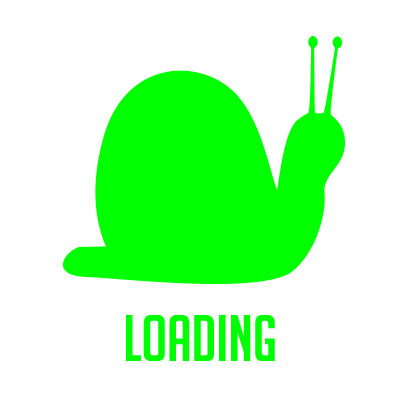
<style>
.page{position:relative;width:400px;height:400px;background:#ffffff}
.page>*{position:absolute;margin:0}
.t1{font:64px "BigNoodleTitling";color:#00ff00}
</style>
<div class="page">
<p class="t1" style="left:126px;top:315px;width:149px;height:46px">loading</p>
</div>
